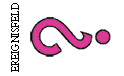
<style>
.page{position:relative;width:124px;height:76px;background:#ffffff}
.page>*{position:absolute;margin:0}
.t1{font:12px "AdobeDevanagari-Regular";color:#000000;scale:0.9 1}
</style>
<div class="page">
<p class="t1" style="left:11px;top:3px;width:8px;height:69px;rotate:-90deg">EREIGNISFELD</p>
</div>
